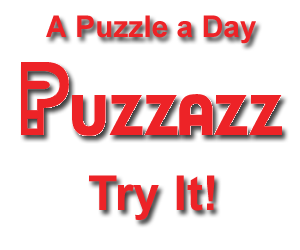
<style>
.page{position:relative;width:300px;height:250px;background:#ffffff}
.page>*{position:absolute;margin:0}
.t1{font:30px "Arial-BoldMT";color:#ed2327}
.t2{font:48px "Arial-BoldMT";color:#ed2327}
</style>
<div class="page">
<p class="t1" style="left:46px;top:15px;width:210px;height:29px">A Puzzle a Day</p>
<p class="t2" style="left:89px;top:175px;width:126px;height:45px">Try It!</p>
</div>
